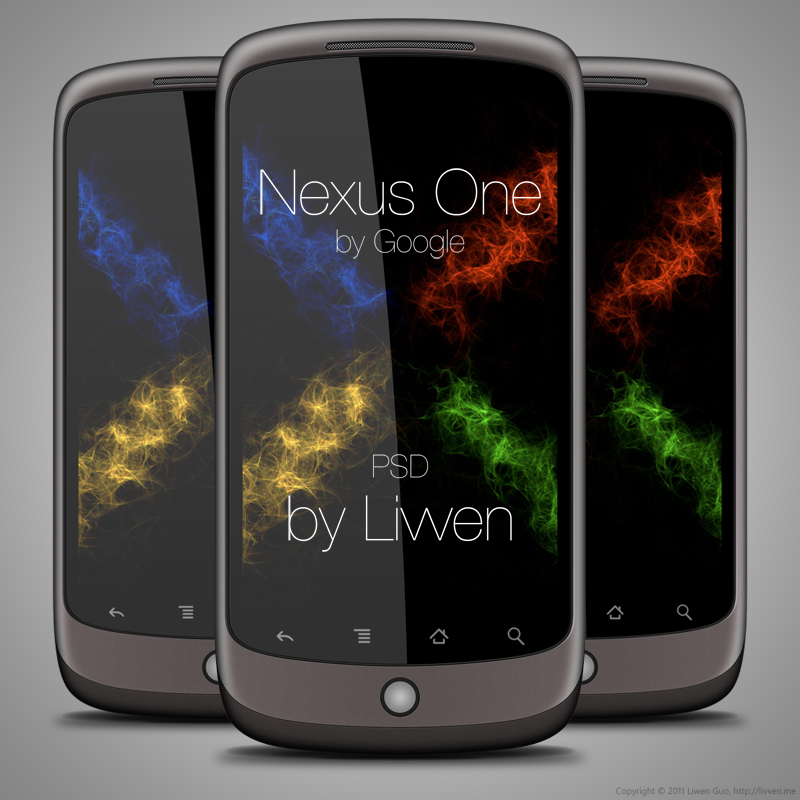
<style>
.page{position:relative;width:800px;height:800px}
.page>*{position:absolute;margin:0}
.t1{font:63px "HelveticaNeueLTCom-UltLt";color:#ffffff}
.t2{font:31.5px "HelveticaNeueLTCom-UltLt";color:#ffffff}
.t3{font:63px/63px "HelveticaNeueLTCom-UltLt";color:#ffffff}
.t4{font:31.5px/63px "HelveticaNeueLTCom-UltLt";color:#ffffff}
</style>
<div class="page">
<p class="t1" style="left:260px;top:168px;width:281px;height:91px;text-align:center">Nexus One<br><span class="t2">by Google</span></p>
<p class="t3" style="left:288px;top:454px;width:224px;height:98px;text-align:center"><span class="t4">PSD<br></span>by Livven</p>
</div>
